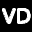
<style>
.page{position:relative;width:32px;height:32px;background:#000000}
.page>*{position:absolute;margin:0}
.t1{font:20px "DejaVuSans";color:#ffffff}
</style>
<div class="page">
<p class="t1" style="left:2px;top:8px;width:28px;height:15px">VD</p>
</div>
